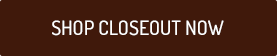
<style>
.page{position:relative;width:277px;height:56px;background:#40190b}
.page>*{position:absolute;margin:0}
.t1{font:20px "Dosis-Medium";color:#ffffff}
</style>
<div class="page">
<p class="t1" style="left:52px;top:20px;width:172px;height:16px">SHOP CLOSEOUT NOW</p>
</div>
